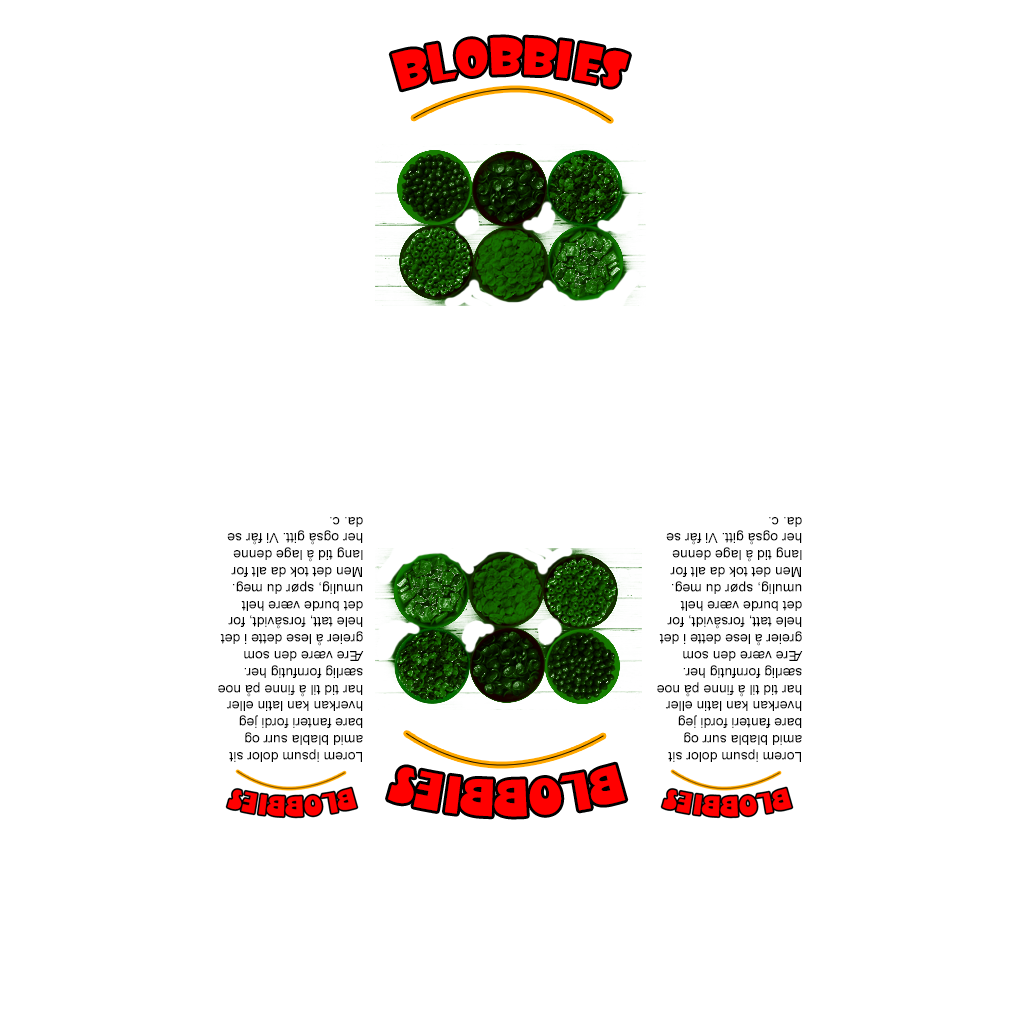
<style>
.page{position:relative;width:1024px;height:1024px;background:#ffffff}
.page>*{position:absolute;margin:0}
.t1{font:46.8px "ShowcardGothic-Reg";color:#ff0000}
.t2{font:14px "ArialMT";color:#000000}
</style>
<div class="page">
<p class="t1" style="left:391px;top:37px;width:238px;height:53px">BLOBBIES</p>
<p class="t2" style="left:218px;top:517px;width:146px;height:245px;rotate:180deg">Lorem ipsum dolor sit amid blabla surr og bare fanteri fordi jeg hverkan kan latin eller har tid til å finne på noe særlig fornfutig her. Ære være den som greier å lese dette i det hele tatt, forsåvidt, for det burde være helt umulig, spør du meg. Men det tok da alt for lang tid å lage denne her også gitt. Vi får se da. c.</p>
<p class="t2" style="left:657px;top:517px;width:146px;height:245px;rotate:180deg">Lorem ipsum dolor sit amid blabla surr og bare fanteri fordi jeg hverkan kan latin eller har tid til å finne på noe særlig fornfutig her. Ære være den som greier å lese dette i det hele tatt, forsåvidt, for det burde være helt umulig, spør du meg. Men det tok da alt for lang tid å lage denne her også gitt. Vi får se da. c.</p>
</div>
